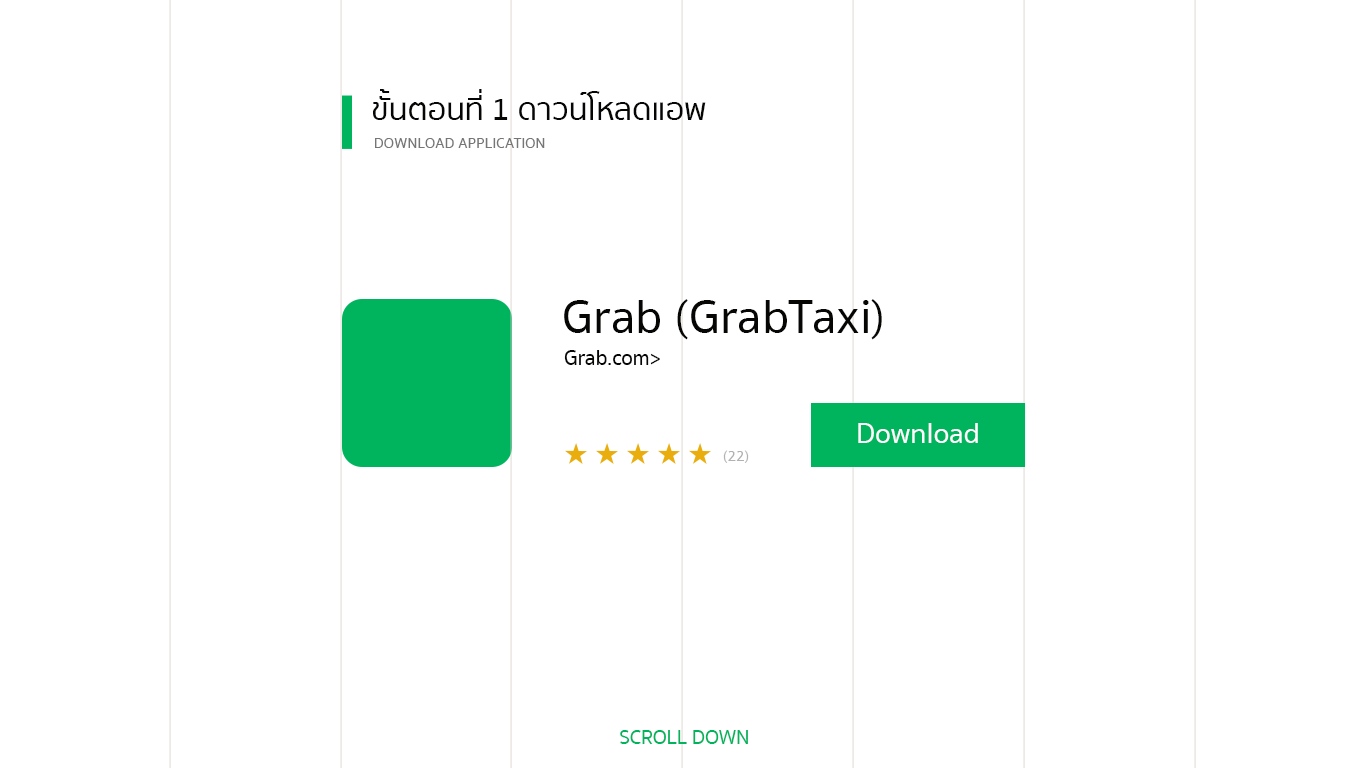
<style>
.page{position:relative;width:1366px;height:768px;background:#ffffff}
.page>*{position:absolute;margin:0}
.t1{font:27.9px "SukhumvitSet-Medium";color:#060605}
.t2{font:13.2px "SukhumvitSet-Medium";color:#767676}
.t3{font:43px "SukhumvitSet-Medium";color:#060605}
.t4{font:18.5px "SukhumvitSet-Medium";color:#060605}
.t5{font:25.6px "SukhumvitSet-Medium";color:#ffffff}
.t6{font:13.3px "SukhumvitSet-Medium";color:#b2b1b1}
.t7{font:17.6px "SukhumvitSet-Medium";color:#00b45e}
</style>
<div class="page">
<p class="t1" style="left:373px;top:89px;width:333px;height:31px">ขั้นตอนที่ 1 ดาวน์โหลดแอพ</p>
<p class="t2" style="left:375px;top:138px;width:170px;height:10px">DOWNLOAD APPLICATION</p>
<p class="t3" style="left:564px;top:299px;width:318px;height:41px">Grab (GrabTaxi)</p>
<p class="t4" style="left:564px;top:350px;width:96px;height:15px">Grab.com&gt;</p>
<p class="t5" style="left:858px;top:423px;width:120px;height:20px">Download</p>
<p class="t6" style="left:723px;top:450px;width:26px;height:13px">(22)</p>
<p class="t7" style="left:620px;top:730px;width:128px;height:14px">SCROLL DOWN</p>
</div>
